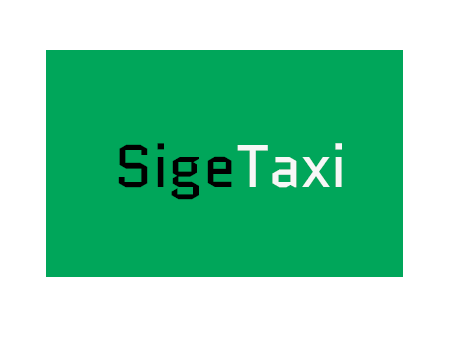
<style>
.page{position:relative;width:454px;height:340px;background:#00a65a}
.page>*{position:absolute;margin:0}
.t1{font:60px "Quantico-Regular";color:#000000}
.t2{font:60px "Quantico-Regular";color:#f7f7f7}
</style>
<div class="page">
<p class="t1" style="left:118px;top:143px;width:224px;height:57px">Sige<span class="t2">Taxi</span></p>
</div>
